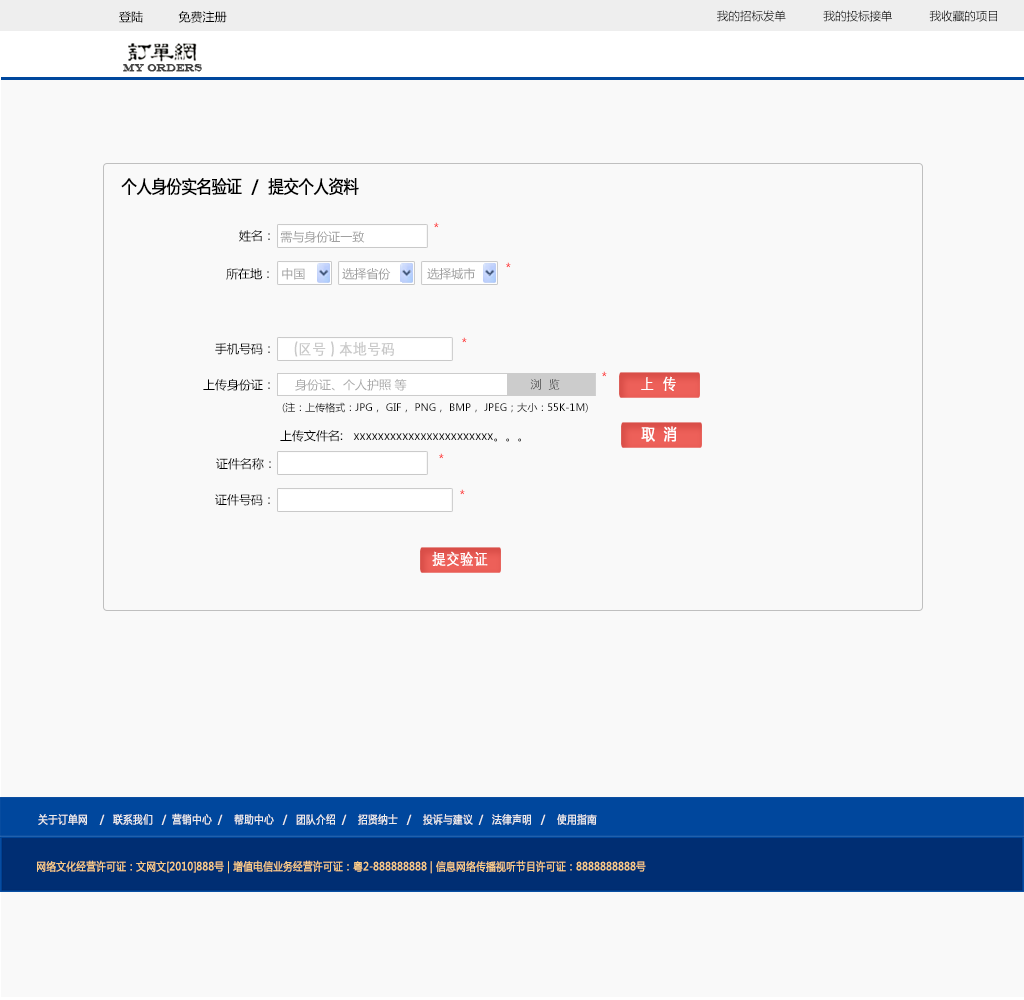
<style>
.page{position:relative;width:1024px;height:1000px;background:#f9f9f9}
.page>*{position:absolute;margin:0}
.t1{font:12px "MicrosoftYaHei";color:#000000}
.t2{font:11.5px "MicrosoftYaHei";color:#000000}
.t3{font:11px "EngraversMT";color:#434343;font-variant:small-caps;font-weight:bold;scale:0.86 1}
.t4{font:17.4px "MicrosoftYaHei";color:#000000;font-variant:small-caps;font-weight:bold;scale:0.86 1}
.t5{font:12px "MicrosoftYaHei"}
.t6{font:12px "MicrosoftYaHei";color:#a0a0a0}
.t7{font:15.4px "STXihei";color:#c9c9c9;font-variant:small-caps;font-weight:bold;scale:0.86 1}
.t8{font:15.4px "STXihei";color:#ffffff;font-variant:small-caps;font-weight:bold;scale:0.86 1}
.t9{font:12px "MicrosoftYaHei";color:#a9a9a9}
.t10{font:12px "STXihei"}
.t11{font:10px "MicrosoftYaHei";color:#000000}
.t12{font:15.4px "MicrosoftYaHei";color:#ffffff;font-variant:small-caps;font-weight:bold;scale:0.86 1}
.t13{font:11px "MicrosoftYaHei";color:#eeeeee;font-variant:small-caps;font-weight:bold;scale:0.86 1}
.t14{font:15.4px "STXihei";color:#eeeeee;font-variant:small-caps;font-weight:bold;scale:0.86 1}
.t15{font:11px "MicrosoftYaHei";color:#facd89;font-variant:small-caps;font-weight:bold;scale:0.87 1}
.t16{font:11px "MicrosoftYaHei";color:#eeeeee;font-variant:small-caps;font-weight:bold;scale:0.87 1}
</style>
<div class="page">
<p class="t1" style="left:119px;top:11px;width:108px;height:12px">登陆          免费注册</p>
<p class="t2" style="left:717px;top:10px;width:280px;height:12px">我的招标发单           我的投标接单           我收藏的项目</p>
<p class="t3" style="left:123px;top:64px;width:79px;height:8px">MY ORDERS</p>
<p class="t4" style="left:121px;top:177px;width:238px;height:19px">个人身份实名验证  /  提交个人资料</p>
<p class="t5" style="left:434px;top:222px;width:5px;height:6px">*</p>
<p class="t1" style="left:239px;top:230px;width:31px;height:12px">姓名：</p>
<p class="t6" style="left:280px;top:231px;width:85px;height:12px">需与身份证一致</p>
<p class="t1" style="left:226px;top:268px;width:43px;height:12px">所在地：</p>
<p class="t6" style="left:282px;top:268px;width:23px;height:12px">中国</p>
<p class="t6" style="left:342px;top:268px;width:49px;height:12px">选择省份</p>
<p class="t6" style="left:427px;top:267px;width:48px;height:13px">选择城市</p>
<p class="t5" style="left:506px;top:262px;width:5px;height:6px">*</p>
<p class="t7" style="left:294px;top:341px;width:100px;height:16px">(区号 ) 本地号码</p>
<p class="t5" style="left:462px;top:337px;width:5px;height:6px">*</p>
<p class="t1" style="left:215px;top:343px;width:55px;height:12px">手机号码：</p>
<p class="t5" style="left:602px;top:371px;width:5px;height:6px">*</p>
<p class="t8" style="left:641px;top:376px;width:35px;height:15px">上  传</p>
<p class="t1" style="left:203px;top:379px;width:67px;height:12px">上传身份证：</p>
<p class="t9" style="left:295px;top:379px;width:112px;height:12px">身份证、个人护照 等</p>
<p class="t10" style="left:530px;top:378px;width:30px;height:12px">浏  览</p>
<p class="t11" style="left:282px;top:402px;width:306px;height:11px"><span class="t1"><br><br> </span>(注：上传格式：JPG， GIF， PNG， BMP， JPEG；大小：55K-1M)</p>
<p class="t1" style="left:280px;top:430px;width:241px;height:12px">上传文件名:   xxxxxxxxxxxxxxxxxxxxxxx。。。</p>
<p class="t12" style="left:641px;top:426px;width:36px;height:16px">取  消</p>
<p class="t1" style="left:216px;top:458px;width:55px;height:12px">证件名称：</p>
<p class="t5" style="left:439px;top:453px;width:5px;height:6px">*</p>
<p class="t1" style="left:215px;top:494px;width:55px;height:12px">证件号码：</p>
<p class="t5" style="left:460px;top:489px;width:5px;height:6px">*</p>
<p class="t8" style="left:432px;top:551px;width:56px;height:16px">提交验证</p>
<p class="t13" style="left:38px;top:813px;width:559px;height:12px"><span class="t14"><br><br></span>关于订单网    /   联系我们   /  营销中心  /    帮助中心   /   团队介绍  /    招贤纳士   /    投诉与建议  /   法律声明   /    使用指南</p>
<p class="t15" style="left:37px;top:860px;width:609px;height:14px"><span class="t16"> </span>网络文化经营许可证：文网文[2010]888号 | 增值电信业务经营许可证：粤2-888888888 | 信息网络传播视听节目许可证：8888888888号</p>
</div>
